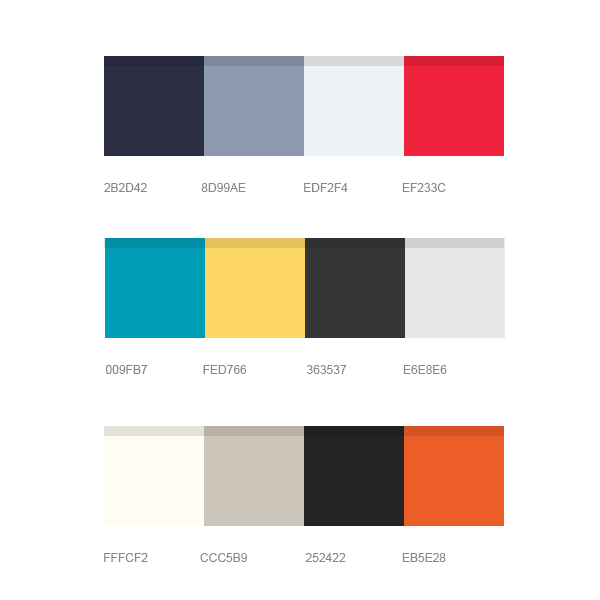
<style>
.page{position:relative;width:600px;height:600px;background:#ffffff}
.page>*{position:absolute;margin:0}
.t1{font:12px "ArialMT";color:#878787;text-transform:uppercase}
</style>
<div class="page">
<p class="t1" style="left:104px;top:183px;width:43px;height:9px">2B2D42</p>
<p class="t1" style="left:201px;top:183px;width:45px;height:9px">8D99AE</p>
<p class="t1" style="left:304px;top:183px;width:44px;height:9px">EDF2F4</p>
<p class="t1" style="left:402px;top:183px;width:44px;height:9px">EF233C</p>
<p class="t1" style="left:105px;top:365px;width:43px;height:9px">009FB7</p>
<p class="t1" style="left:203px;top:365px;width:44px;height:9px">FED766</p>
<p class="t1" style="left:306px;top:365px;width:41px;height:9px">363537</p>
<p class="t1" style="left:403px;top:365px;width:44px;height:9px">E6E8E6</p>
<p class="t1" style="left:104px;top:553px;width:44px;height:9px">FFFCF2</p>
<p class="t1" style="left:200px;top:553px;width:47px;height:9px">CCC5B9</p>
<p class="t1" style="left:305px;top:553px;width:41px;height:9px">252422</p>
<p class="t1" style="left:402px;top:553px;width:44px;height:9px">EB5E28</p>
</div>
